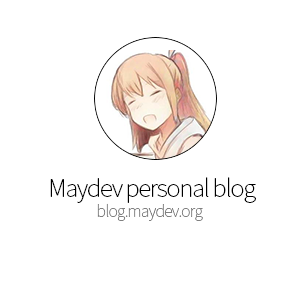
<style>
.page{position:relative;width:300px;height:300px;background:#ffffff}
.page>*{position:absolute;margin:0}
.t1{font:24px "NotoSansCJKkr-Thin";letter-spacing:-0.05em;color:#000000}
.t2{font:16px "NotoSansCJKkr-Thin";letter-spacing:-0.05em;color:#808080}
</style>
<div class="page">
<p class="t1" style="left:50px;top:177px;width:206px;height:26px">Maydev personal blog</p>
<p class="t2" style="left:97px;top:203px;width:106px;height:18px">blog.maydev.org</p>
</div>
